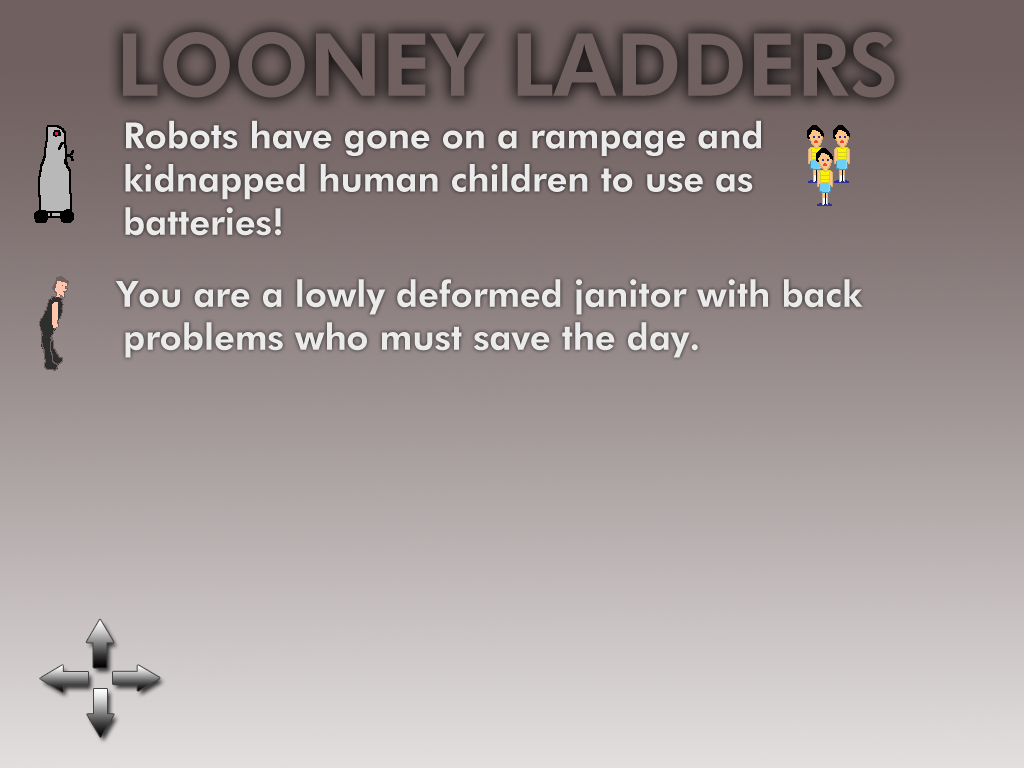
<style>
.page{position:relative;width:1024px;height:768px}
.page>*{position:absolute;margin:0}
.t1{font:87.1px "FuturaBT-Heavy";color:#706060}
.t2{font:36px "FuturaBT-Heavy";color:#ebebeb}
</style>
<div class="page">
<p class="t1" style="left:123px;top:32px;width:772px;height:66px">LOONEY LADDERS</p>
<p class="t2" style="left:115px;top:120px;width:748px;height:238px">Robots have gone on a rampage and kidnapped human children to use as batteries!<br>  You are a lowly deformed janitor with back problems who must save the day.</p>
</div>
